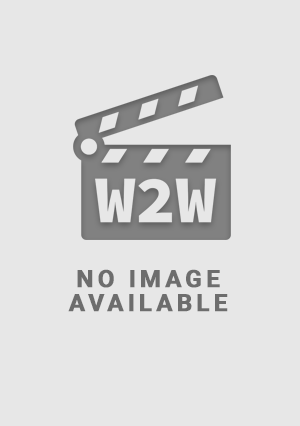
<style>
.page{position:relative;width:300px;height:426px;background:#e7e7e7}
.page>*{position:absolute;margin:0}
.t1{font:24px/24px "Roboto-Bold";letter-spacing:0.15em;color:#6d6d6d;text-transform:uppercase;font-weight:bold}
</style>
<div class="page">
<p class="t1" style="left:68px;top:269px;width:160px;height:43px;text-align:center">No IMAGE<br>AVAILABLE</p>
</div>
